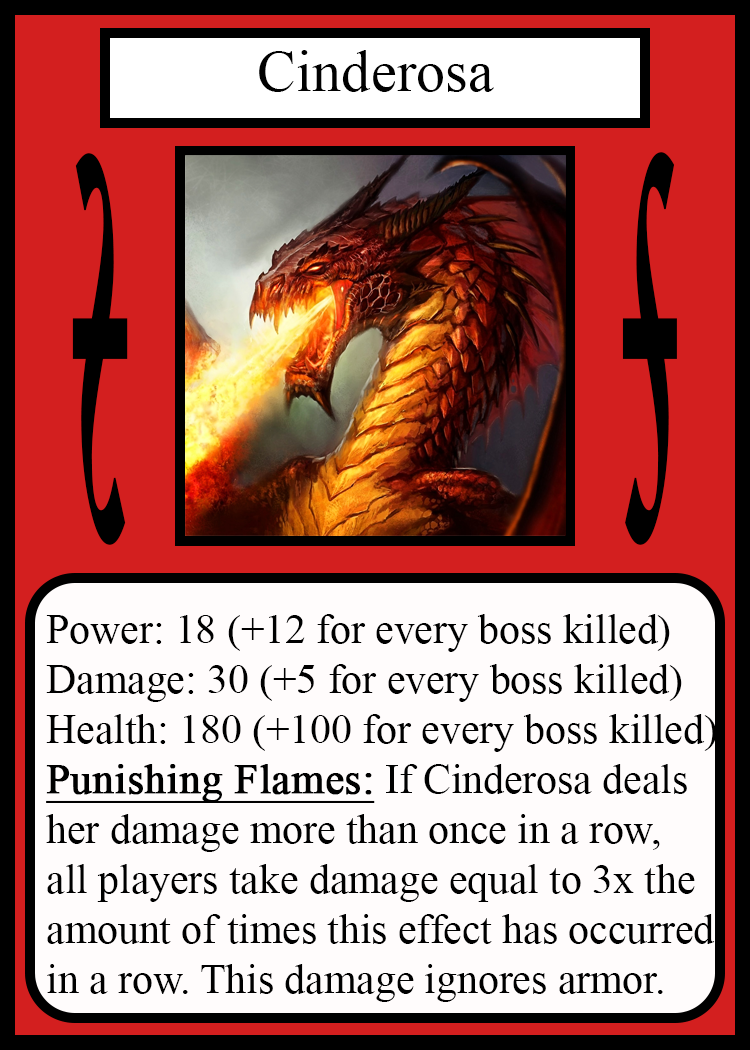
<style>
.page{position:relative;width:750px;height:1050px;background:#fffcfc}
.page>*{position:absolute;margin:0}
.t1{font:58.3px "TimesNewRomanPSMT";color:#010101}
.t2{font:814.3px "Apple-Chancery";color:#000000;font-weight:bold;scale:0.17 1}
.t3{font:814.6px "Apple-Chancery";color:#000000;font-weight:bold;scale:0.17 1}
.t4{font:41.7px "TimesNewRomanPSMT";color:#000000}
.t5{font:41.7px "TimesNewRomanPSMT";color:#000000;font-weight:bold;text-decoration:underline}
</style>
<div class="page">
<p class="t1" style="left:259px;top:50px;width:235px;height:42px">Cinderosa</p>
<p class="t2" style="left:72px;top:153px;width:56px;height:392px;rotate:180deg">s</p>
<p class="t3" style="left:622px;top:152px;width:55px;height:393px">s</p>
<p class="t4" style="left:46px;top:614px;width:671px;height:388px">Power: 18 (+12 for every boss killed)<br>Damage: 30 (+5 for every boss killed)<br>Health: 180 (+100 for every boss killed)<br><span class="t5">Punishing Flames:</span> If Cinderosa deals<br>her damage more than once in a row,<br>all players take damage equal to 3x the<br>amount of times this effect has occurred<br>in a row. This damage ignores armor.</p>
</div>
